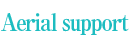
<style>
.page{position:relative;width:129px;height:43px;background:#ffffff}
.page>*{position:absolute;margin:0}
.t1{font:24px "RyuminPro-ExBold";letter-spacing:-0.08em;color:#1dbcc0;scale:0.9 1}
</style>
<div class="page">
<p class="t1" style="left:1px;top:13px;width:128px;height:22px">Aerial support</p>
</div>
